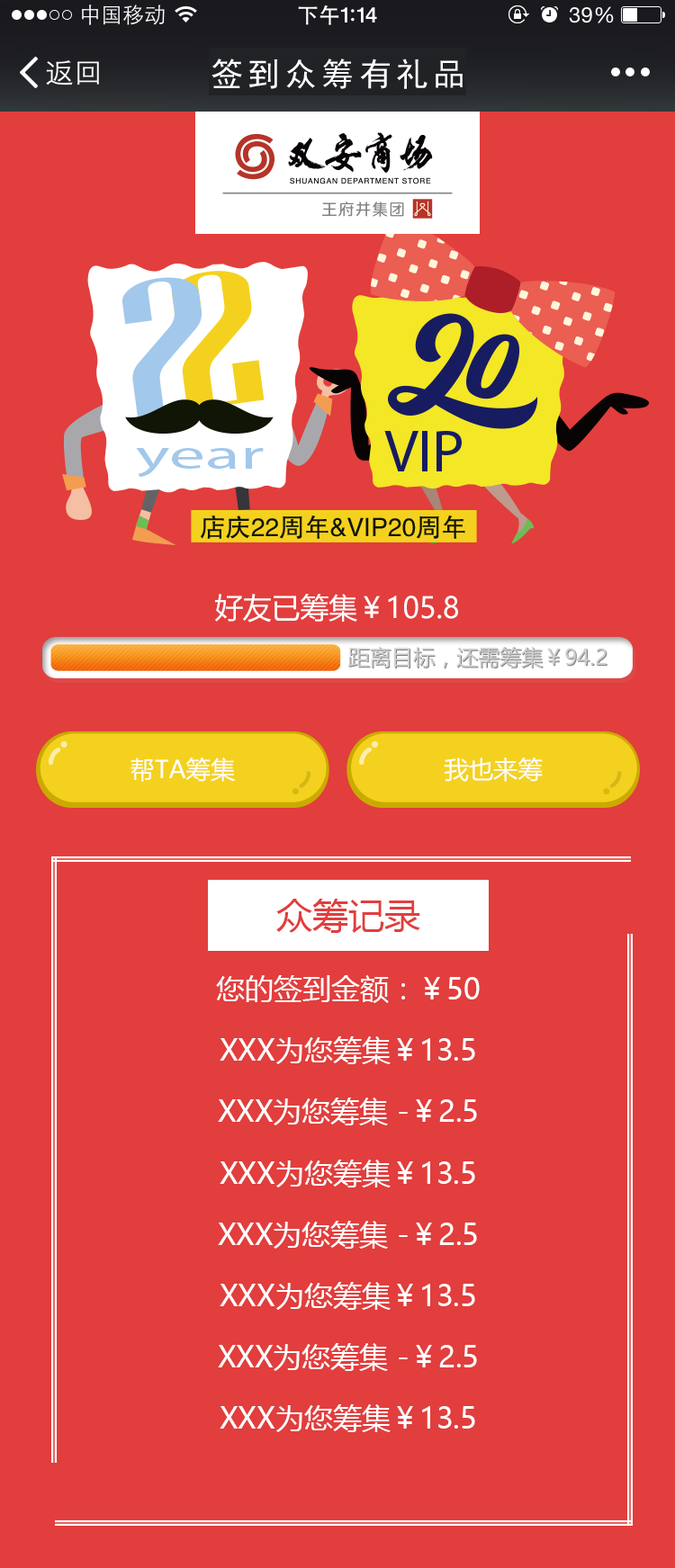
<style>
.page{position:relative;width:675px;height:1568px;background:#e13e3d}
.page>*{position:absolute;margin:0}
.t1{font:28.8px "MicrosoftYaHei";color:#ffffff}
.t2{font:24.5px "MicrosoftYaHei";color:#ffffff}
.t3{font:36px "MicrosoftYaHei";color:#e13e3d}
.t4{font:28.8px/61.3px "MicrosoftYaHei";color:#ffffff}
</style>
<div class="page">
<p class="t1" style="left:215px;top:594px;width:243px;height:29px">好友已筹集￥105.8</p>
<p class="t2" style="left:130px;top:757px;width:105px;height:25px">帮TA筹集</p>
<p class="t2" style="left:444px;top:757px;width:98px;height:25px">我也来筹</p>
<p class="t3" style="left:276px;top:899px;width:144px;height:34px">众筹记录</p>
<p class="t4" style="left:216px;top:975px;width:263px;height:457px;text-align:center">您的签到金额：￥50<br>XXX为您筹集￥13.5<br>XXX为您筹集 -￥2.5<br>XXX为您筹集￥13.5<br>XXX为您筹集 -￥2.5<br>XXX为您筹集￥13.5<br>XXX为您筹集 -￥2.5<br>XXX为您筹集￥13.5<br>XXX为您筹集 -￥2.5</p>
</div>
